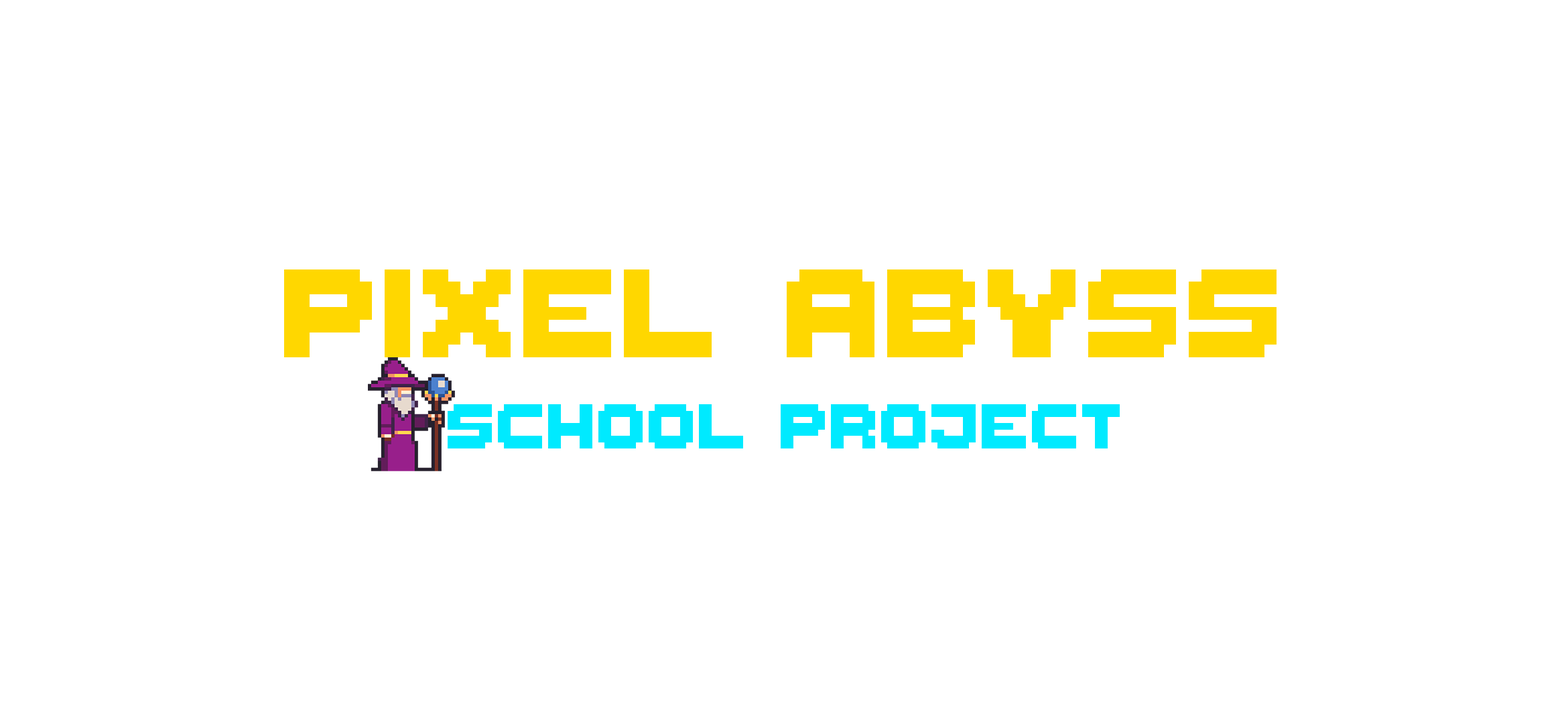
<style>
.page{position:relative;width:1568px;height:724px;background:#ffffff}
.page>*{position:absolute;margin:0}
.t1{font:100.5px/97.8px "ThaleahFat";color:#00eaff}
.t2{font:201px/81.8px "ThaleahFat";color:#ffd700}
</style>
<div class="page">
<p class="t1" style="left:284px;top:269px;width:993px;height:179px;text-align:center"><span class="t2">PIXEL ABYSS<br><br></span>School project</p>
</div>
